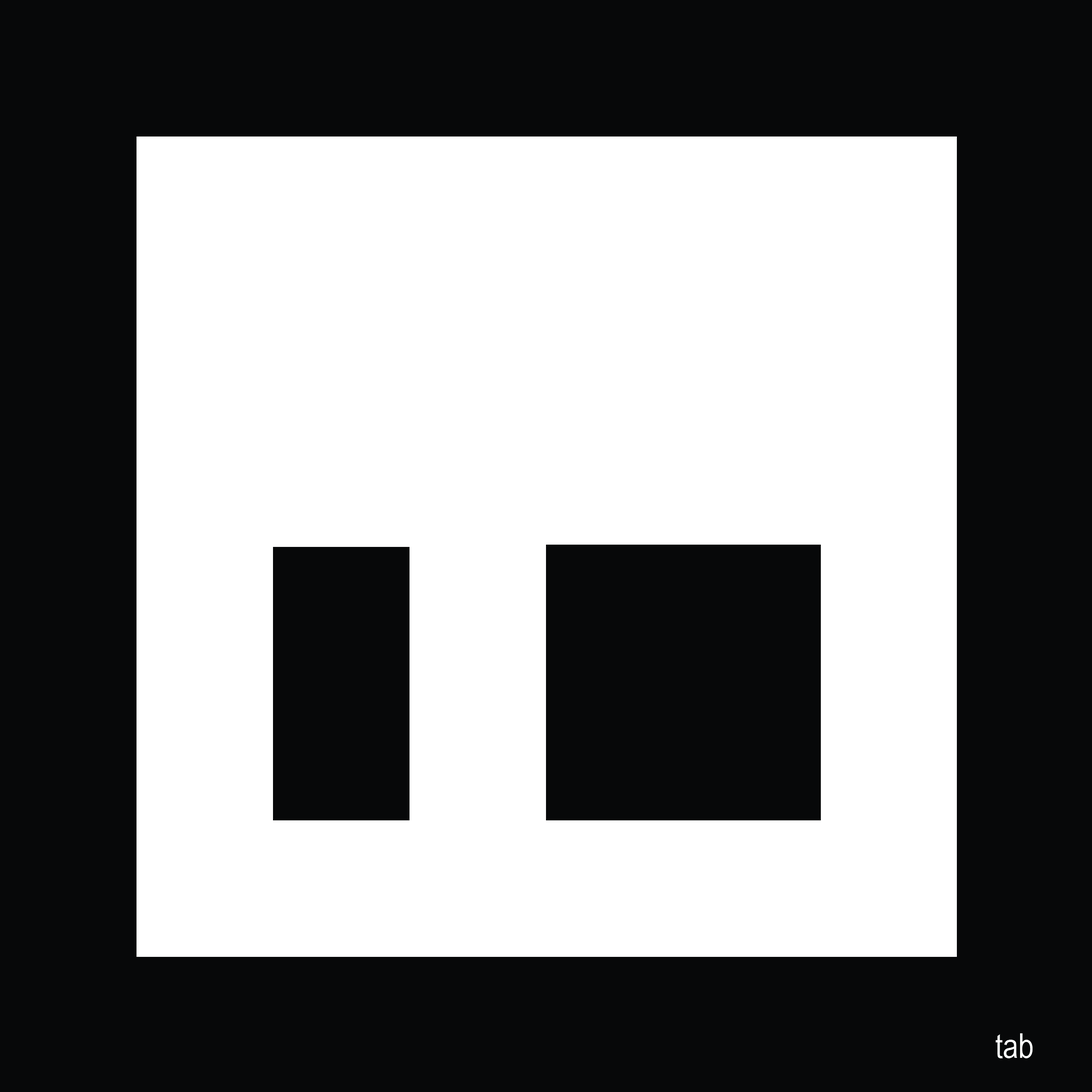
<style>
.page{position:relative;width:1092px;height:1092px;background:#070809}
.page>*{position:absolute;margin:0}
.t1{font:34.1px "ArialNarrow";color:#ffffff}
</style>
<div class="page">
<p class="t1" style="left:996px;top:1033px;width:37px;height:25px">tab</p>
</div>
